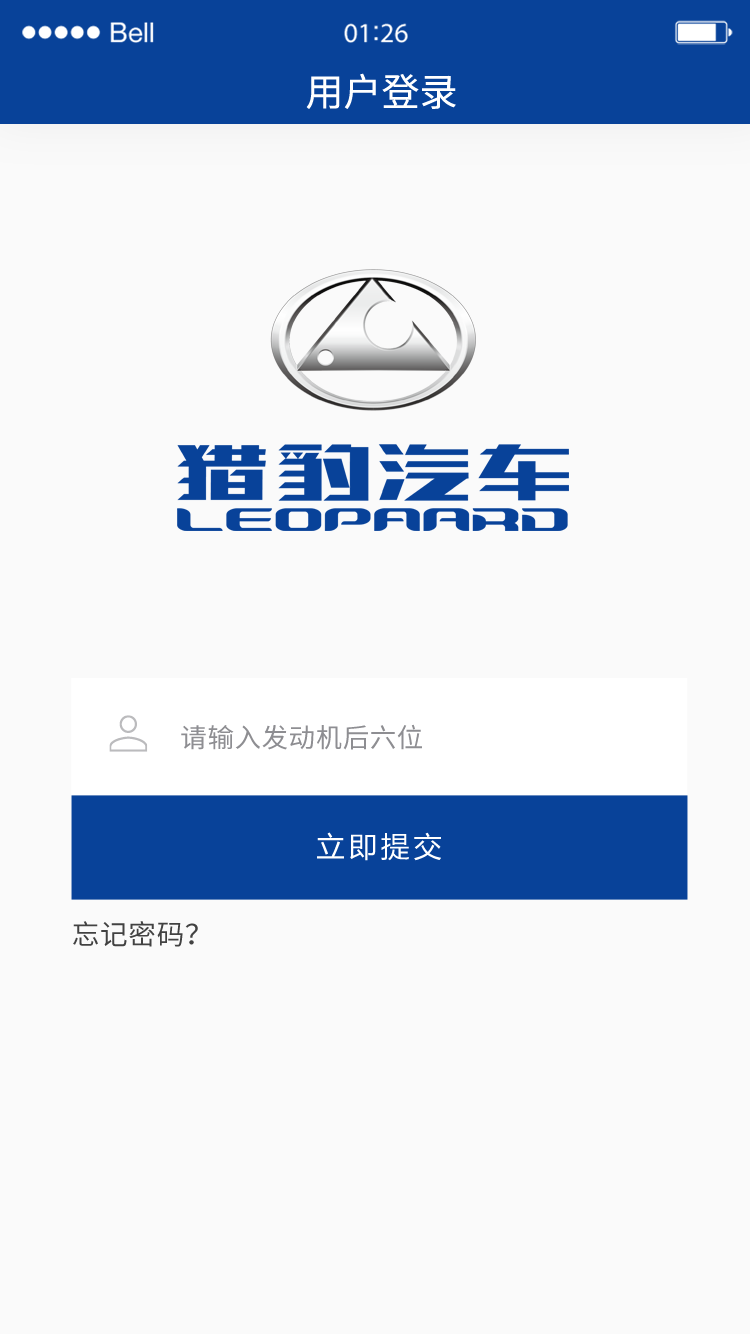
<style>
.page{position:relative;width:750px;height:1334px;background:#fafafa}
.page>*{position:absolute;margin:0}
.t1{font:38px "SourceHanSansCN-Regular";color:#ffffff}
.t2{font:26.5px "SourceHanSansCN-Regular";letter-spacing:0.02em;color:#8e8e92}
.t3{font:28.4px "MicrosoftYaHei";letter-spacing:0.14em;color:#ffffff}
.t4{font:27.7px "SourceHanSansCN-Regular";letter-spacing:0.02em;color:#424242}
</style>
<div class="page">
<p class="t1" style="left:306px;top:73px;width:150px;height:36px">用户登录</p>
<p class="t2" style="left:181px;top:724px;width:241px;height:26px">请输入发动机后六位</p>
<p class="t3" style="left:317px;top:832px;width:124px;height:29px">立即提交</p>
<p class="t4" style="left:73px;top:921px;width:125px;height:26px">忘记密码？</p>
</div>
